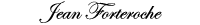
<style>
.page{position:relative;width:200px;height:25px;background:#ffffff}
.page>*{position:absolute;margin:0}
.t1{font:25px "EdwardianScriptITC";color:#000000}
</style>
<div class="page">
<p class="t1" style="left:39px;top:1px;width:123px;height:22px">Jean Forteroche</p>
</div>
